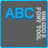
<style>
.page{position:relative;width:48px;height:48px;background:#5c5c5c}
.page>*{position:absolute;margin:0}
.t1{font:13.5px "ArialMT";color:#00b1ff;font-variant:small-caps;font-weight:bold}
.t2{font:7px/5px "Cambria";color:#c0c0c0;font-variant:small-caps;font-weight:bold}
</style>
<div class="page">
<p class="t1" style="left:5px;top:7px;width:29px;height:12px">ABC</p>
<p class="t2" style="left:36px;top:7px;width:10px;height:34px;text-align:center;rotate:90deg">unicode<br>font tool</p>
</div>
